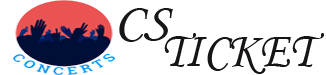
<style>
.page{position:relative;width:326px;height:75px;background:#ffffff}
.page>*{position:absolute;margin:0}
.t1{font:51.1px "MonotypeCorsiva";color:#191616;scale:1.09 1}
.t2{font:51.1px "MonotypeCorsiva";color:#161415;scale:0.93 1}
</style>
<div class="page">
<p class="t1" style="left:119px;top:8px;width:54px;height:34px">CS</p>
<p class="t2" style="left:164px;top:33px;width:160px;height:41px">TICKET</p>
</div>
